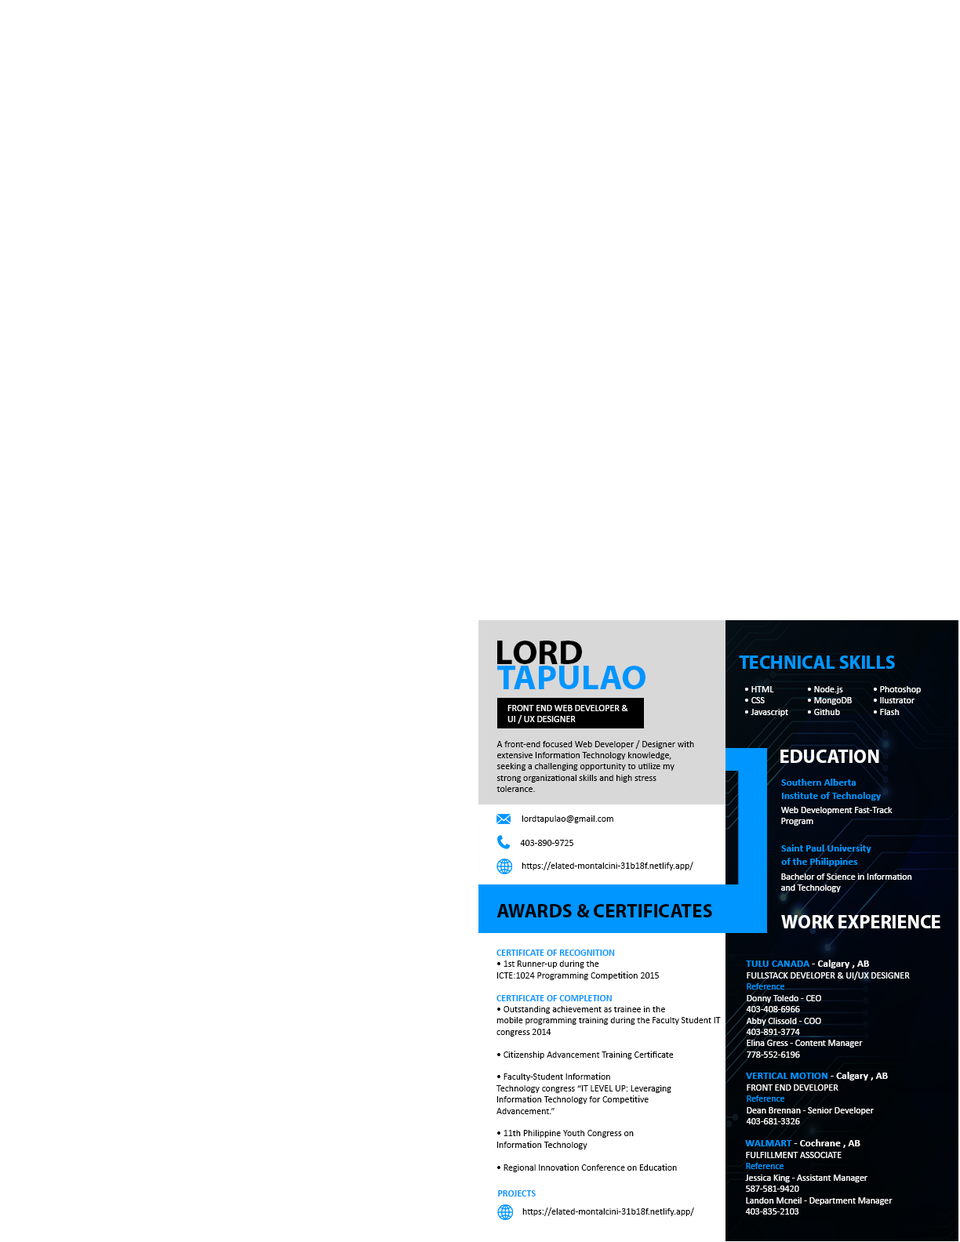
<style>
.page{position:relative;width:960px;height:1242px;background:#ffffff}
.page>*{position:absolute;margin:0}
.t1{font:34.3px "MyriadPro-Bold";color:#000000}
.t2{font:34.3px "MyriadPro-Bold";color:#0096ff}
.t3{font:18.8px "MyriadPro-Bold";color:#0096ff}
.t4{font:9.4px "Calibri";color:#ffffff}
.t5{font:9.4px "Calibri";color:#000000}
.t6{font:18.8px "MyriadPro-Bold";color:#ffffff}
.t7{font:10.5px "Calibri-Bold";color:#0096ff}
.t8{font:18.8px "MyriadPro-Bold";color:#000000}
.t9{font:9.4px "Calibri-Bold";color:#0096ff}
.t10{font:9.4px "MyriadPro-Regular";color:#000000}
.t11{font:10.5px "Calibri-Bold";color:#ffffff}
.t12{font:9.4px "Calibri";color:#0096ff}
</style>
<div class="page">
<p class="t1" style="left:497px;top:641px;width:85px;height:23px">LORD</p>
<p class="t2" style="left:497px;top:666px;width:148px;height:23px">TAPULAO</p>
<p class="t3" style="left:739px;top:656px;width:156px;height:13px">TECHNICAL SKILLS</p>
<p class="t4" style="left:745px;top:686px;width:43px;height:31px">• HTML<br>• CSS<br>• Javascript</p>
<p class="t4" style="left:808px;top:686px;width:44px;height:29px">• Node.js<br>• MongoDB<br>• Github</p>
<p class="t4" style="left:874px;top:686px;width:47px;height:29px">• Photoshop<br>• llustrator<br>• Flash</p>
<p class="t4" style="left:507px;top:705px;width:121px;height:19px">FRONT END WEB DEVELOPER &amp;<br>UI / UX DESIGNER</p>
<p class="t5" style="left:496px;top:740px;width:198px;height:52px">A front-end focused Web Developer / Designer with<br>extensive Information Technology knowledge,<br>seeking a challenging opportunity to utilize my<br>strong organizational skills and high stress<br>tolerance.</p>
<p class="t6" style="left:780px;top:750px;width:99px;height:13px">EDUCATION</p>
<p class="t7" style="left:781px;top:779px;width:100px;height:22px">Southern Alberta<br>Institute of Technology</p>
<p class="t4" style="left:781px;top:807px;width:111px;height:19px">Web Development Fast-Track<br>Program</p>
<p class="t5" style="left:522px;top:816px;width:91px;height:7px">lordtapulao@gmail.com</p>
<p class="t5" style="left:520px;top:840px;width:53px;height:6px">403-890-9725</p>
<p class="t7" style="left:781px;top:845px;width:90px;height:22px">Saint Paul University<br>of the Philippines</p>
<p class="t5" style="left:522px;top:862px;width:171px;height:9px">https://elated-montalcini-31b18f.netlify.app/</p>
<p class="t4" style="left:781px;top:874px;width:131px;height:18px">Bachelor of Science in Information<br>and Technology</p>
<p class="t8" style="left:496px;top:904px;width:216px;height:14px">AWARDS &amp; CERTIFICATES</p>
<p class="t6" style="left:781px;top:915px;width:159px;height:14px">WORK EXPERIENCE</p>
<p class="t5" style="left:496px;top:950px;width:225px;height:222px"><span class="t9">CERTIFICATE OF RECOGNITION<br></span>• 1st Runner-up during the<br>ICTE:1024 Programming Compe<span class="t10">titi</span>on 2015<br><br><span class="t9">CERTIFICATE OF COMPLETION<br></span>• Outstanding achievement as trainee in the<br>mobile programming training during the Faculty Student IT<br>congress 2014<br><br>• Ci<span class="t10">ti</span>zenship Advancement Training Cer<span class="t10">ti</span>ficate<br><br>• Faculty-Student Informa<span class="t10">ti</span>on<br>Technology congress “IT LEVEL UP: Leveraging<br>Informa<span class="t10">ti</span>on Technology for Compe<span class="t10">titi</span>ve<br>Advancement.”<br><br>• 11th Philippine Youth Congress on<br>Informa<span class="t10">ti</span>on Technology<br><br>• Regional Innova<span class="t10">ti</span>on Conference on Educa<span class="t10">ti</span>on</p>
<p class="t11" style="left:746px;top:960px;width:123px;height:9px"><span class="t7">TULU CANADA</span> - Calgary , AB</p>
<p class="t4" style="left:746px;top:972px;width:164px;height:86px">FULLSTACK DEVELOPER &amp; UI/UX DESIGNER<br><span class="t12">Reference<br></span>Donny Toledo - CEO<br>403-408-6966<br>Abby Clissold - COO<br>403-891-3774<br>Elina Gress - Content Manager<br>778-552-6196</p>
<p class="t7" style="left:746px;top:1072px;width:142px;height:9px">VERTICAL MOTION<span class="t11"> - Calgary , AB</span></p>
<p class="t4" style="left:746px;top:1085px;width:128px;height:40px">FRONT END DEVELOPER<br><span class="t12">Reference<br></span>Dean Brennan - Senior Developer<br>403-681-3326</p>
<p class="t11" style="left:745px;top:1139px;width:115px;height:9px"><span class="t7">WALMART </span>- Cochrane , AB</p>
<p class="t4" style="left:745px;top:1152px;width:147px;height:63px">FULFILLMENT ASSOCIATE<br><span class="t12">Reference<br></span>Jessica King - Assistant Manager<br>587-581-9420<br>Landon Mcneil - Department Manager<br>403-835-2103</p>
<p class="t9" style="left:498px;top:1190px;width:38px;height:7px">PROJECTS</p>
<p class="t5" style="left:522px;top:1208px;width:172px;height:8px">https://elated-montalcini-31b18f.netlify.app/</p>
</div>
